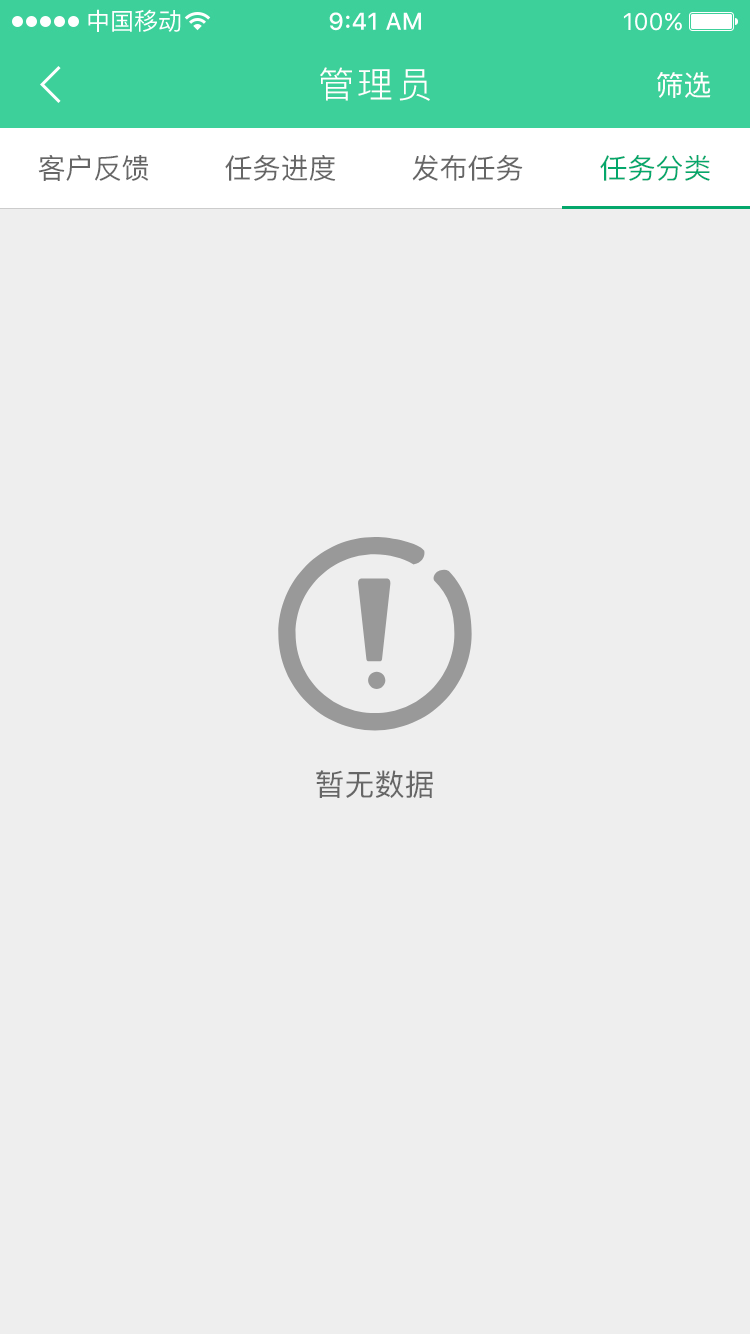
<style>
.page{position:relative;width:750px;height:1334px;background:#eeeeee}
.page>*{position:absolute;margin:0}
.t1{font:36px "PingFang-SC-Regular";letter-spacing:0.1em;color:#ffffff}
.t2{font:28px "PingFang-SC-Medium";color:#ffffff}
.t3{font:28px "PingFang-SC-Medium";color:#666666}
.t4{font:28px "PingFang-SC-Medium";color:#04a76b}
.t5{font:30px "PingFang-SC-Medium";color:#666666}
</style>
<div class="page">
<p class="t1" style="left:320px;top:67px;width:110px;height:34px">管理员</p>
<p class="t2" style="left:657px;top:72px;width:54px;height:26px">筛选</p>
<p class="t3" style="left:38px;top:155px;width:111px;height:26px">客户反馈</p>
<p class="t3" style="left:225px;top:155px;width:111px;height:26px">任务进度</p>
<p class="t3" style="left:412px;top:155px;width:111px;height:26px">发布任务</p>
<p class="t4" style="left:600px;top:155px;width:110px;height:26px">任务分类</p>
<p class="t5" style="left:316px;top:770px;width:117px;height:28px">暂无数据</p>
</div>
